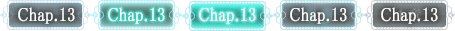
<style>
.page{position:relative;width:455px;height:31px}
.page>*{position:absolute;margin:0}
.t1{font:19px "MS-PMincho";color:#ffffff;font-weight:bold;scale:0.84 1}
</style>
<div class="page">
<p class="t1" style="left:18px;top:7px;width:57px;height:17px">Chap.13</p>
<p class="t1" style="left:108px;top:7px;width:57px;height:17px">Chap.13</p>
<p class="t1" style="left:199px;top:7px;width:57px;height:17px">Chap.13</p>
<p class="t1" style="left:290px;top:7px;width:57px;height:17px">Chap.13</p>
<p class="t1" style="left:381px;top:7px;width:57px;height:17px">Chap.13</p>
</div>
